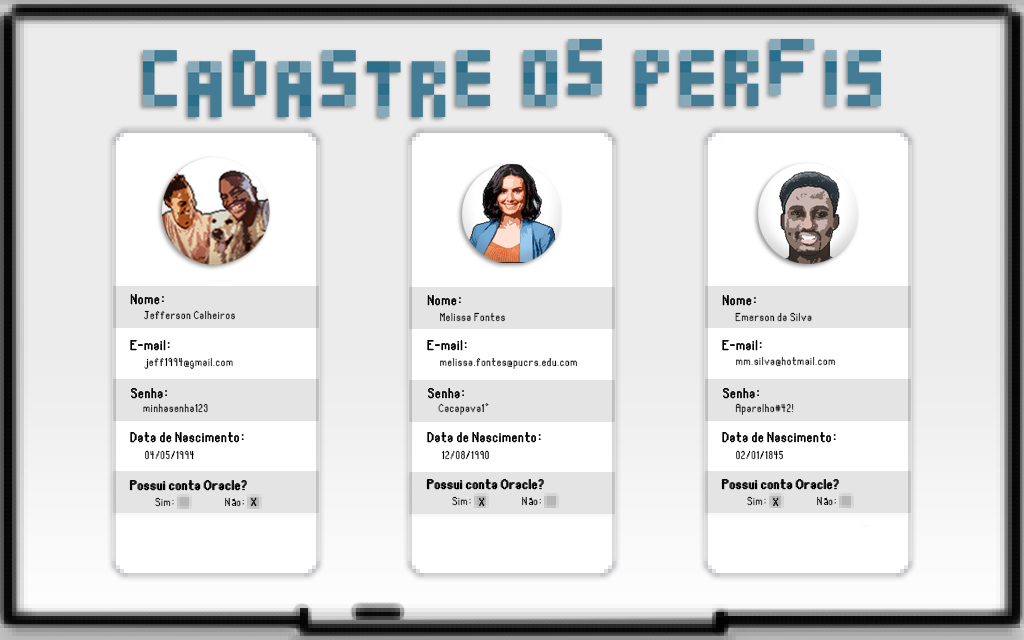
<style>
.page{position:relative;width:1024px;height:640px;background:#ffffff}
.page>*{position:absolute;margin:0}
.t1{font:10.5px "RetroPix";letter-spacing:0.04em;color:#000000}
.t2{font:10.5px "RetroPix";letter-spacing:0.04em;color:#010101}
.t3{font:13px "RetroPix";letter-spacing:0.04em;color:#000000}
.t4{font:10.5px "MyriadPro-Regular";letter-spacing:0.04em;color:#000000}
</style>
<div class="page">
<p class="t1" style="left:144px;top:310px;width:91px;height:10px">Jefferson Calheiros</p>
<p class="t1" style="left:440px;top:312px;width:65px;height:10px">Melissa Fontes</p>
<p class="t2" style="left:735px;top:312px;width:77px;height:10px">Emerson da Silva</p>
<p class="t1" style="left:144px;top:357px;width:89px;height:12px">jeff1994@gmail.com</p>
<p class="t1" style="left:440px;top:357px;width:137px;height:12px">melissa.fontes@pucrs.edu.com</p>
<p class="t1" style="left:736px;top:356px;width:99px;height:10px">mm.silva@hotmail.com</p>
<p class="t1" style="left:143px;top:403px;width:65px;height:10px">minhasenha123</p>
<p class="t1" style="left:438px;top:403px;width:51px;height:12px">Cacapava1*</p>
<p class="t2" style="left:735px;top:403px;width:59px;height:12px">Aparelho#42!</p>
<p class="t1" style="left:145px;top:450px;width:49px;height:10px">04/05/1994</p>
<p class="t1" style="left:442px;top:450px;width:47px;height:10px">12/08/1990</p>
<p class="t1" style="left:736px;top:450px;width:47px;height:10px">02/01/1845</p>
<p class="t3" style="left:129px;top:480px;width:117px;height:11px">Possui conta Oracle?</p>
<p class="t3" style="left:130px;top:480px;width:117px;height:11px">Possui conta Oracle?</p>
<p class="t3" style="left:130px;top:480px;width:117px;height:11px">Possui conta Oracle?</p>
<p class="t3" style="left:426px;top:479px;width:117px;height:11px">Possui conta Oracle?</p>
<p class="t3" style="left:427px;top:479px;width:117px;height:11px">Possui conta Oracle?</p>
<p class="t3" style="left:427px;top:479px;width:117px;height:11px">Possui conta Oracle?</p>
<p class="t3" style="left:721px;top:479px;width:117px;height:11px">Possui conta Oracle?</p>
<p class="t3" style="left:722px;top:479px;width:117px;height:11px">Possui conta Oracle?</p>
<p class="t3" style="left:722px;top:479px;width:117px;height:11px">Possui conta Oracle?</p>
<p class="t1" style="left:155px;top:497px;width:19px;height:10px">Sim:</p>
<p class="t1" style="left:225px;top:497px;width:19px;height:10px">N<span class="t4">ã</span>o:</p>
<p class="t1" style="left:251px;top:497px;width:6px;height:10px">X</p>
<p class="t1" style="left:251px;top:497px;width:6px;height:10px">X</p>
<p class="t1" style="left:452px;top:496px;width:19px;height:10px">Sim:</p>
<p class="t1" style="left:479px;top:497px;width:6px;height:10px">X</p>
<p class="t1" style="left:479px;top:497px;width:6px;height:10px">X</p>
<p class="t1" style="left:522px;top:496px;width:19px;height:10px">N<span class="t4">ã</span>o:</p>
<p class="t1" style="left:747px;top:496px;width:19px;height:10px">Sim:</p>
<p class="t1" style="left:773px;top:497px;width:6px;height:10px">X</p>
<p class="t1" style="left:773px;top:497px;width:6px;height:10px">X</p>
<p class="t1" style="left:817px;top:496px;width:19px;height:10px">N<span class="t4">ã</span>o:</p>
</div>
